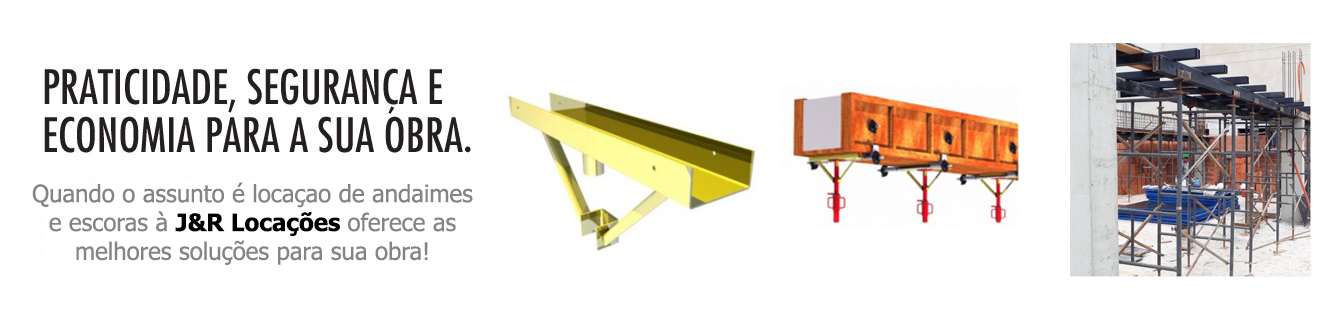
<style>
.page{position:relative;width:1330px;height:319px;background:#ffffff}
.page>*{position:absolute;margin:0}
.t1{font:24px "Tahoma";color:#848484}
.t2{font:24px "Tahoma-Bold";color:#000000}
</style>
<div class="page">
<p class="t1" style="left:32px;top:182px;width:441px;height:83px;text-align:center">Quando o assunto é locaçao de andaimes e escoras à <span class="t2">J&amp;R Locações </span>oferece as melhores soluções para sua obra!</p>
</div>
